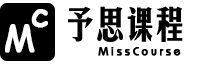
<style>
.page{position:relative;width:217px;height:64px;background:#ffffff}
.page>*{position:absolute;margin:0}
.t1{font:36px "HGMH_CNKI";letter-spacing:-0.2em;color:#000000;font-weight:bold}
.t2{font:36px "ComicSansMS";color:#ffffff;font-weight:bold}
.t3{font:12px "BahamasPlain";letter-spacing:0.2em;color:#000000;font-weight:bold}
</style>
<div class="page">
<p class="t1" style="left:68px;top:6px;width:115px;height:36px">予思课程</p>
<p class="t2" style="left:31px;top:9px;width:17px;height:19px">c</p>
<p class="t2" style="left:5px;top:24px;width:30px;height:29px">M</p>
<p class="t3" style="left:98px;top:47px;width:83px;height:9px">MissCourse</p>
</div>
